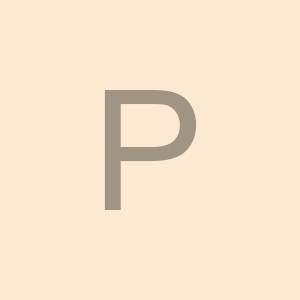
<style>
.page{position:relative;width:300px;height:300px;background:#fde9d1}
.page>*{position:absolute;margin:0}
.t1{font:166.7px "ArialMT";color:#a19484}
</style>
<div class="page">
<p class="t1" style="left:104px;top:90px;width:93px;height:120px">P</p>
</div>
